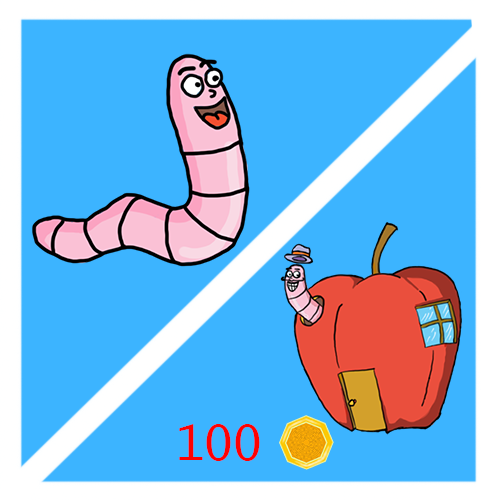
<style>
.page{position:relative;width:500px;height:500px;background:#3cb4ff}
.page>*{position:absolute;margin:0}
.t1{font:48px "LucidaConsole";color:#ff0101}
</style>
<div class="page">
<p class="t1" style="left:179px;top:424px;width:81px;height:37px">100</p>
</div>
